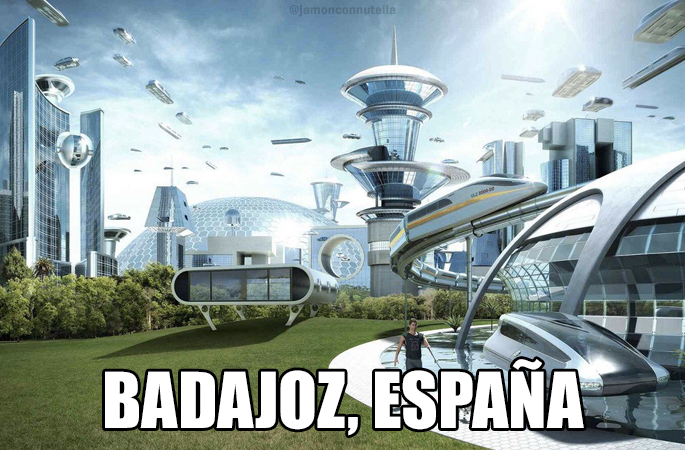
<style>
.page{position:relative;width:685px;height:450px}
.page>*{position:absolute;margin:0}
.t1{font:13.2px "FranklinGothic-Demi";color:#557188}
.t2{font:71.2px "Impact";color:#ffffff}
</style>
<div class="page">
<p class="t1" style="left:289px;top:5px;width:107px;height:12px">@jamonconnutella</p>
<p class="t2" style="left:105px;top:359px;width:479px;height:77px">BADAJOZ, ESPAÑA</p>
</div>
